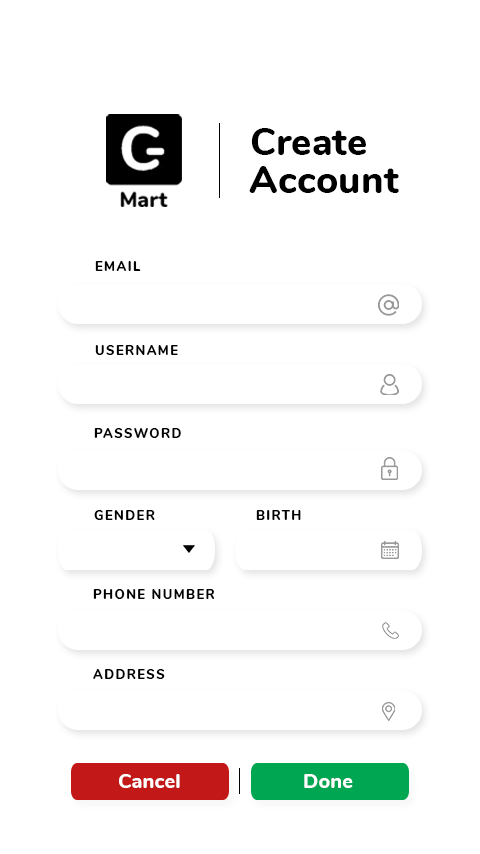
<style>
.page{position:relative;width:480px;height:854px;background:#ffffff}
.page>*{position:absolute;margin:0}
.t1{font:38px "Nunito-ExtraBold";letter-spacing:0.005em;color:#000000}
.t2{font:13.1px "Nunito-ExtraBold";letter-spacing:0.105em;color:#000000}
.t3{font:20.1px "Nunito-ExtraBold";letter-spacing:0.005em;color:#ffffff}
</style>
<div class="page">
<p class="t1" style="left:251px;top:128px;width:115px;height:27px">Create</p>
<p class="t1" style="left:249px;top:166px;width:150px;height:27px">Account</p>
<p class="t2" style="left:95px;top:261px;width:46px;height:10px">EMAIL</p>
<p class="t2" style="left:95px;top:345px;width:83px;height:10px">USERNAME</p>
<p class="t2" style="left:94px;top:428px;width:87px;height:10px">PASSWORD</p>
<p class="t2" style="left:94px;top:510px;width:61px;height:10px">GENDER</p>
<p class="t2" style="left:256px;top:510px;width:45px;height:10px">BIRTH</p>
<p class="t2" style="left:93px;top:589px;width:122px;height:10px">PHONE NUMBER</p>
<p class="t2" style="left:93px;top:669px;width:72px;height:10px">ADDRESS</p>
<p class="t3" style="left:119px;top:774px;width:61px;height:14px">Cancel</p>
<p class="t3" style="left:304px;top:774px;width:49px;height:14px">Done</p>
</div>
